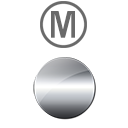
<style>
.page{position:relative;width:128px;height:128px;background:#ffffff}
.page>*{position:absolute;margin:0}
.t1{font:30px "TVpl";letter-spacing:0.05em;color:#6a6a6a}
</style>
<div class="page">
<p class="t1" style="left:51px;top:11px;width:24px;height:27px">M</p>
</div>
